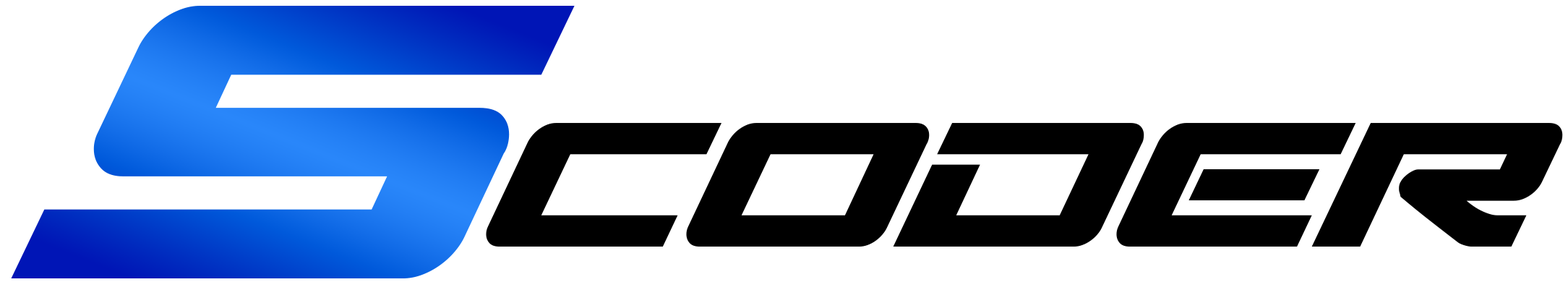
<style>
.page{position:relative;width:1568px;height:282px;background:#ffffff}
.page>*{position:absolute;margin:0}
.t1{font:441.4px "SabreSharkBold"}
.t2{font:200px "SabreSharkBold";color:#000000}
</style>
<div class="page">
<p class="t1" style="left:11px;top:6px;width:564px;height:272px">S</p>
<p class="t2" style="left:486px;top:123px;width:1077px;height:124px">coder</p>
</div>
